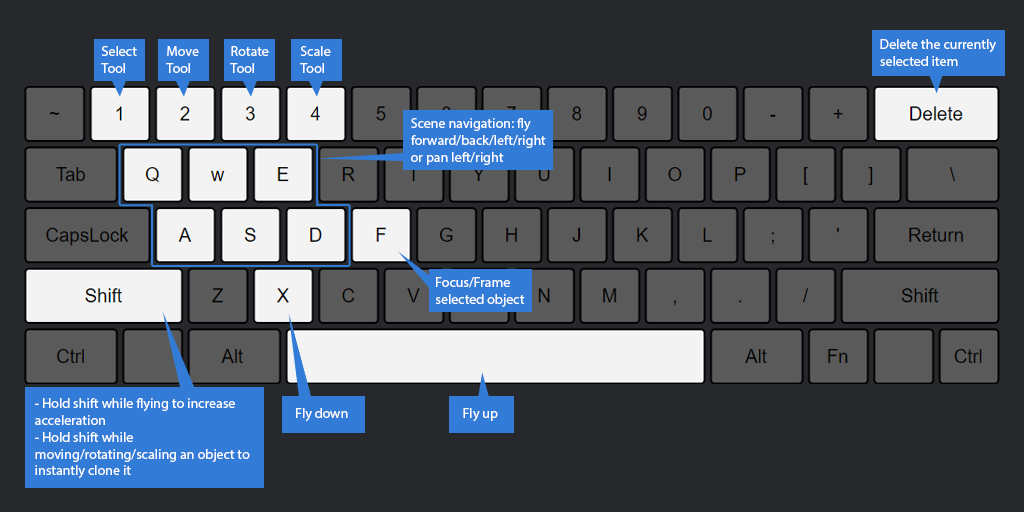
<style>
.page{position:relative;width:1024px;height:512px;background:#26282b}
.page>*{position:absolute;margin:0}
.t1{font:14px "MyriadPro-Regular";color:#ffffff}
</style>
<div class="page">
<p class="t1" style="left:880px;top:39px;width:116px;height:27px">Delete the currently selected item</p>
<p class="t1" style="left:101px;top:46px;width:36px;height:27px">Select<br>Tool</p>
<p class="t1" style="left:166px;top:46px;width:33px;height:27px">Move<br>Tool</p>
<p class="t1" style="left:230px;top:46px;width:39px;height:27px">Rotate<br>Tool</p>
<p class="t1" style="left:300px;top:46px;width:31px;height:27px">Scale<br>Tool</p>
<p class="t1" style="left:411px;top:118px;width:135px;height:47px">Scene navigation: fly forward/back/left/right or pan left/right</p>
<p class="t1" style="left:435px;top:277px;width:90px;height:30px">Focus/Frame selected object</p>
<p class="t1" style="left:35px;top:398px;width:215px;height:81px">- Hold shift while flying to increase acceleration<br>- Hold shift while moving/rotating/scaling an object to instantly clone it</p>
<p class="t1" style="left:296px;top:408px;width:52px;height:14px">Fly down</p>
<p class="t1" style="left:463px;top:408px;width:35px;height:13px">Fly up</p>
</div>
